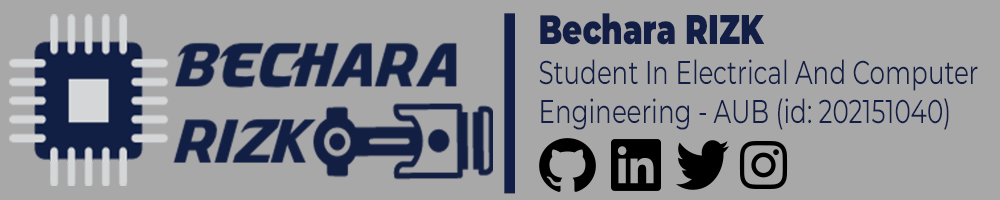
<style>
.page{position:relative;width:1000px;height:200px;background:#a8a8a8}
.page>*{position:absolute;margin:0}
.t1{font:196.8px "LucidaGrande";color:#121e45}
.t2{font:32.8px "Montserrat-Regular";color:#121e45}
.t3{font:41px "Montserrat-Black";color:#121e45}
</style>
<div class="page">
<p class="t1" style="left:504px;top:13px;width:11px;height:181px">|</p>
<p class="t2" style="left:539px;top:13px;width:439px;height:117px"><span class="t3">Bechara RIZK<br></span>Student In Electrical And Computer Engineering - AUB (id: 202151040)</p>
</div>
